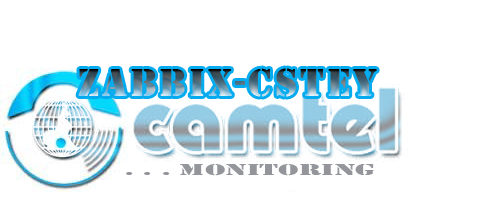
<style>
.page{position:relative;width:484px;height:200px;background:#ffffff}
.page>*{position:absolute;margin:0}
.t1{font:40px "Stencil";letter-spacing:0.075em}
.t2{font:16px "Stencil";color:#94959a;scale:2 1}
</style>
<div class="page">
<p class="t1" style="left:78px;top:68px;width:299px;height:29px">ZABBIX-CSTEY</p>
<p class="t2" style="left:126px;top:164px;width:248px;height:12px">. . . monitoring</p>
</div>
